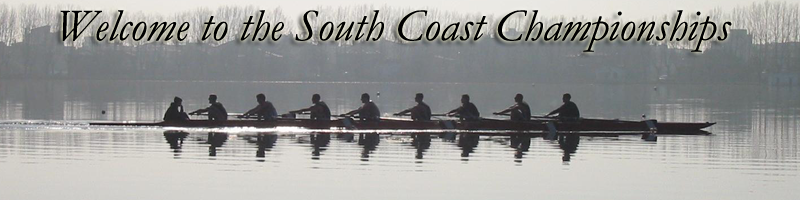
<style>
.page{position:relative;width:800px;height:200px}
.page>*{position:absolute;margin:0}
.t1{font:45.8px "Garamond-Italic";color:#000000}
</style>
<div class="page">
<p class="t1" style="left:60px;top:10px;width:672px;height:42px">Welcome to the South Coast Championships</p>
</div>
